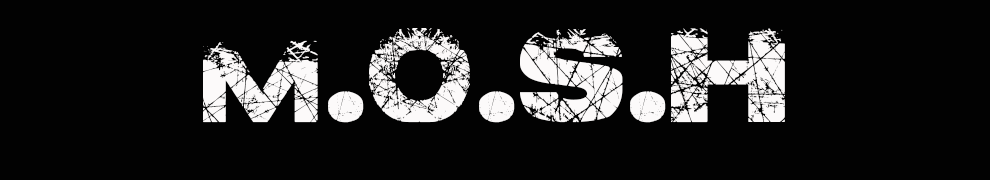
<style>
.page{position:relative;width:990px;height:180px;background:#020202}
.page>*{position:absolute;margin:0}
.t1{font:125px "ActionoftheTimeNewUL";color:#fcfafa}
</style>
<div class="page">
<p class="t1" style="left:203px;top:28px;width:582px;height:95px">M.O.S.H</p>
</div>
